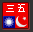
<style>
.page{position:relative;width:33px;height:32px;background:#f20000}
.page>*{position:absolute;margin:0}
.t1{font:10.4px "SimSun";color:#ffffff}
</style>
<div class="page">
<p class="t1" style="left:6px;top:4px;width:19px;height:8px">三五</p>
</div>
